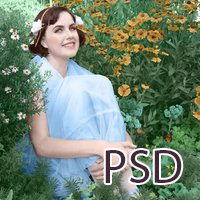
<style>
.page{position:relative;width:200px;height:200px}
.page>*{position:absolute;margin:0}
.t1{font:48px "MyriadPro-Regular";color:#42293a}
</style>
<div class="page">
<p class="t1" style="left:105px;top:150px;width:77px;height:33px">PSD</p>
</div>
